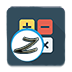
<style>
.page{position:relative;width:72px;height:72px;background:#ffffff}
.page>*{position:absolute;margin:0}
.t1{font:21.1px "Consolas-Italic";scale:0.95 1}
</style>
<div class="page">
<p class="t1" style="left:14px;top:37px;width:24px;height:16px;rotate:178deg">Z</p>
</div>
